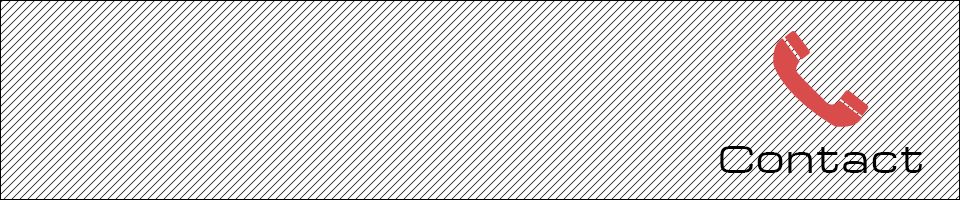
<style>
.page{position:relative;width:960px;height:200px;background:#ffffff}
.page>*{position:absolute;margin:0}
.t1{font:36px "Michroma";letter-spacing:0.05em;color:#000000}
</style>
<div class="page">
<p class="t1" style="left:720px;top:146px;width:202px;height:27px">Contact</p>
</div>
